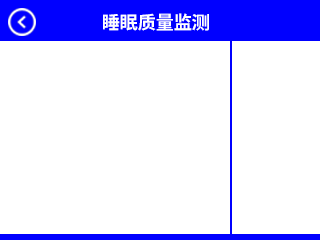
<style>
.page{position:relative;width:320px;height:240px;background:#ffffff}
.page>*{position:absolute;margin:0}
.t1{font:18px "SourceHanSansSC-Bold";color:#ffffff}
</style>
<div class="page">
<p class="t1" style="left:103px;top:13px;width:106px;height:18px">睡眠质量监测</p>
</div>
